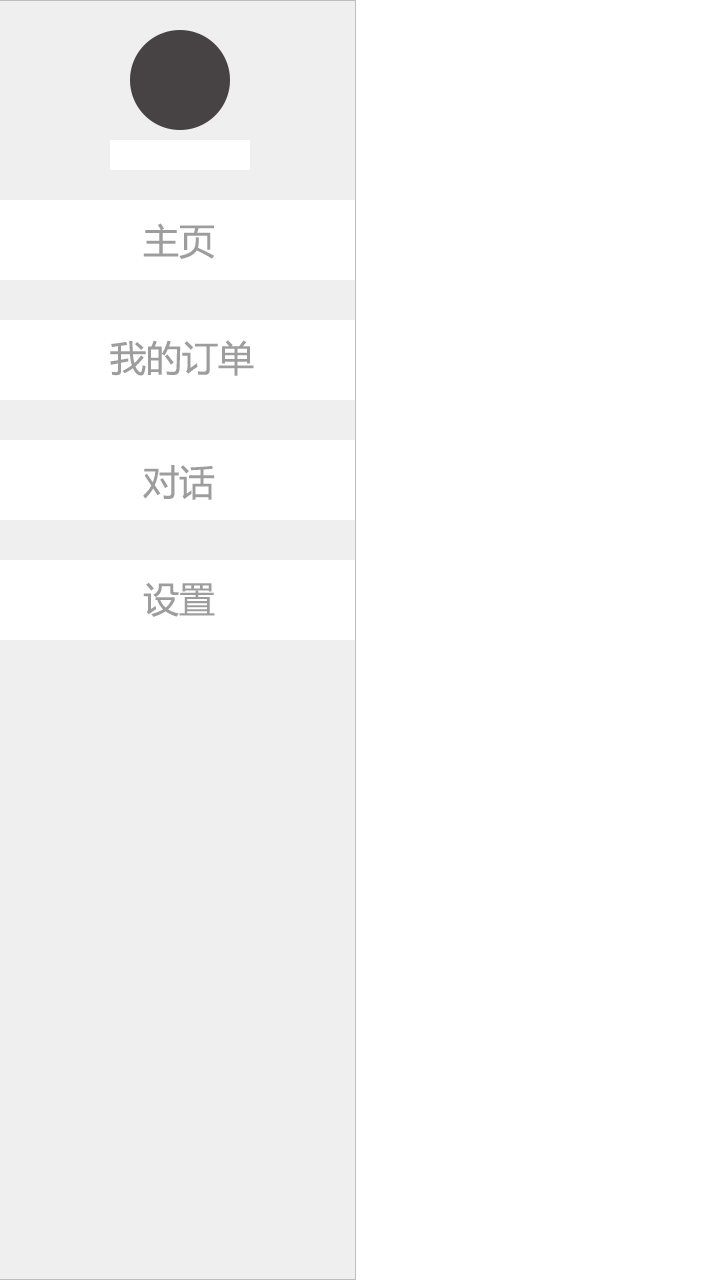
<style>
.page{position:relative;width:720px;height:1280px;background:#ffffff}
.page>*{position:absolute;margin:0}
.t1{font:36px "MicrosoftYaHei";color:#9d9d9d}
</style>
<div class="page">
<p class="t1" style="left:143px;top:223px;width:71px;height:36px">主页</p>
<p class="t1" style="left:110px;top:340px;width:144px;height:36px">我的订单</p>
<p class="t1" style="left:143px;top:465px;width:72px;height:35px">对话</p>
<p class="t1" style="left:143px;top:582px;width:72px;height:35px">设置</p>
</div>
